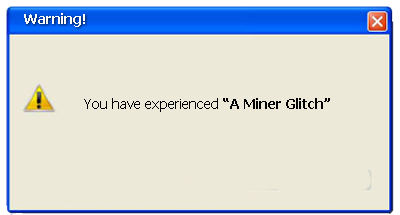
<style>
.page{position:relative;width:400px;height:215px;background:#ece9d8}
.page>*{position:absolute;margin:0}
.t1{font:14px "Tahoma-Bold";color:#fefefe}
.t2{font:14px "Tahoma";color:#010101}
.t3{font:14px "Tahoma-Bold";color:#010101}
</style>
<div class="page">
<p class="t1" style="left:24px;top:13px;width:61px;height:14px">Warning!</p>
<p class="t2" style="left:84px;top:98px;width:246px;height:14px">You have experienced <span class="t3">“A Miner Glitch”</span></p>
</div>
